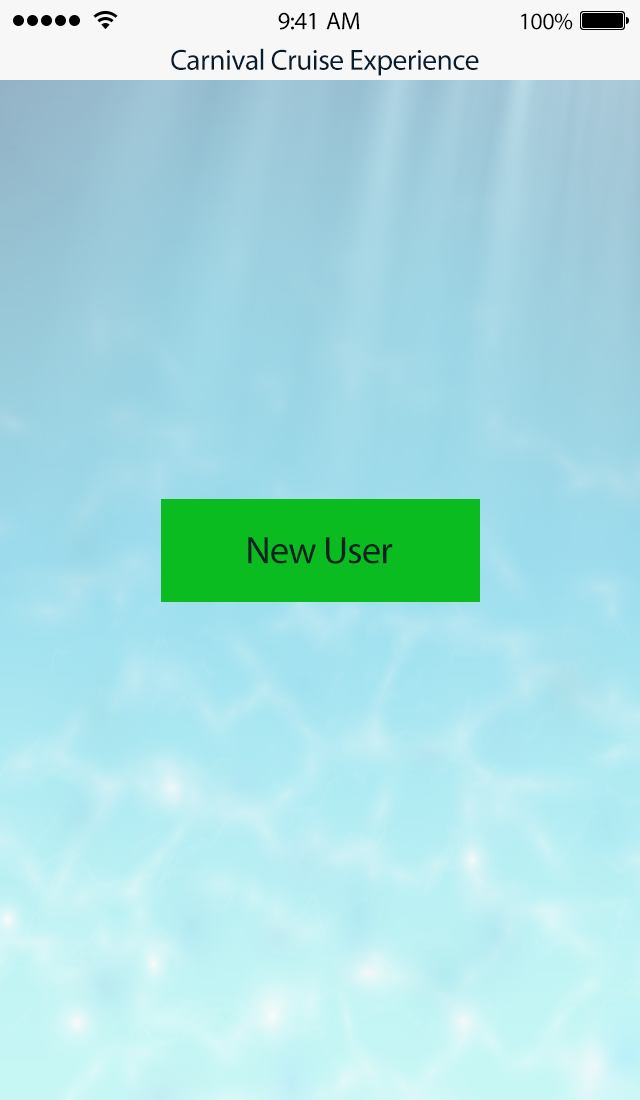
<style>
.page{position:relative;width:640px;height:1100px}
.page>*{position:absolute;margin:0}
.t1{font:25px "MyriadPro-Regular";letter-spacing:-0.02em;color:#000000}
.t2{font:24px "MyriadPro-Regular";letter-spacing:-0.02em;color:#000000}
.t3{font:29.4px "MyriadPro-Regular";letter-spacing:-0.02em;color:#061d30}
.t4{font:38.6px "MyriadPro-Regular";letter-spacing:-0.02em;color:#0a2320}
</style>
<div class="page">
<p class="t1" style="left:278px;top:12px;width:82px;height:18px">9:41 AM</p>
<p class="t2" style="left:521px;top:13px;width:52px;height:17px">100%</p>
<p class="t3" style="left:171px;top:48px;width:308px;height:28px">Carnival Cruise Experience</p>
<p class="t4" style="left:248px;top:537px;width:145px;height:27px">New User</p>
</div>
